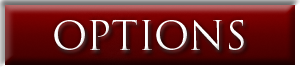
<style>
.page{position:relative;width:300px;height:70px}
.page>*{position:absolute;margin:0}
.t1{font:38.9px "TrajanPro-Regular";color:#ffffff}
</style>
<div class="page">
<p class="t1" style="left:54px;top:19px;width:190px;height:31px">OPTIONS</p>
</div>
